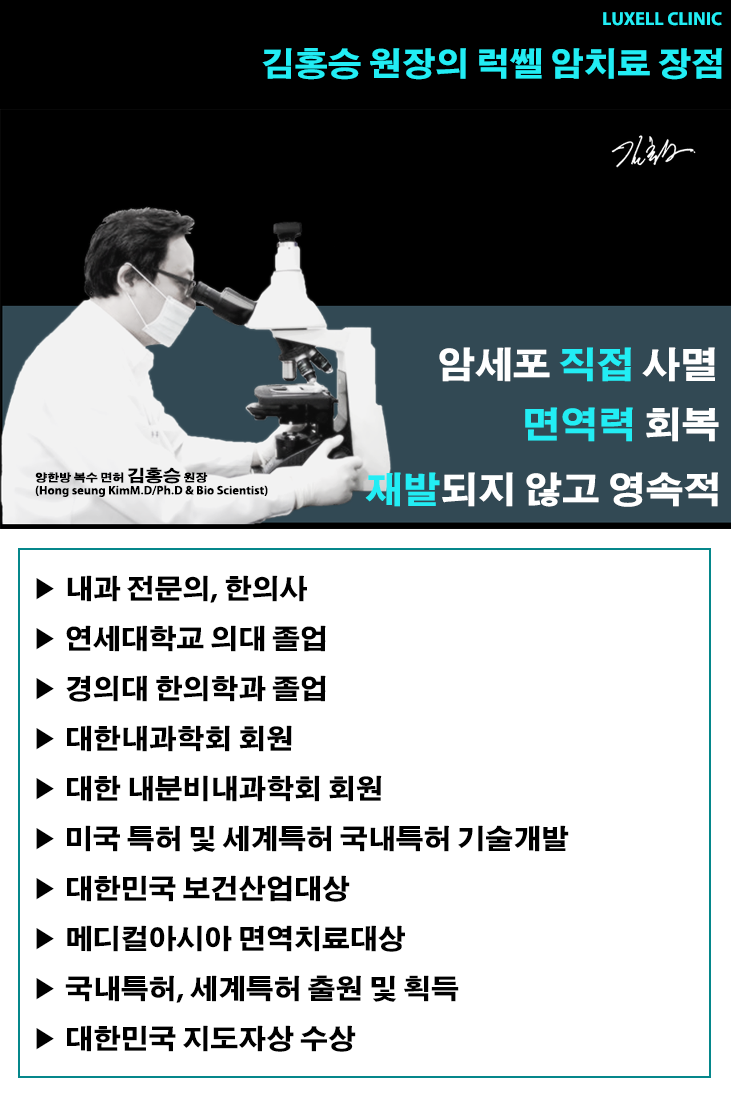
<style>
.page{position:relative;width:731px;height:1094px;background:#ffffff}
.page>*{position:absolute;margin:0}
.t1{font:16.2px "AdobeGothicStd-Bold";color:#22edf4;scale:1.11 1}
.t2{font:32.4px "AdobeGothicStd-Bold";color:#22edf4;scale:1.03 1}
.t3{font:36px "AdobeGothicStd-Bold";color:#ffffff;scale:1.05 1}
.t4{font:36px "AdobeGothicStd-Bold";color:#22edf4;scale:1.05 1}
.t5{font:10.8px/18px "AdobeGothicStd-Bold";color:#000000;scale:1.11 1}
.t6{font:16.2px/18px "AdobeGothicStd-Bold";color:#000000;scale:1.11 1}
.t7{font:27px/50px "AdobeGothicStd-Bold";color:#000000;scale:1.03 1}
</style>
<div class="page">
<p class="t1" style="left:603px;top:12px;width:119px;height:14px">LUXELL CLINIC</p>
<p class="t2" style="left:262px;top:48px;width:460px;height:32px">김홍승 원장의 럭쎌 암치료 장점</p>
<p class="t3" style="left:439px;top:347px;width:276px;height:35px">암세포 <span class="t4">직접</span> 사멸</p>
<p class="t4" style="left:525px;top:407px;width:194px;height:35px">면역력<span class="t3"> 회복</span></p>
<p class="t5" style="left:35px;top:467px;width:233px;height:30px">양한방 복수 면허 <span class="t6">김홍승</span> 원장<br>(Hong seung KimM.D/Ph.D &amp; Bio Scientist)</p>
<p class="t3" style="left:365px;top:472px;width:353px;height:35px"><span class="t4">재발</span>되지 않고 영속적</p>
<p class="t7" style="left:36px;top:575px;width:533px;height:477px">▶ 내과 전문의, 한의사<br>▶ 연세대학교 의대 졸업<br>▶ 경의대 한의학과 졸업<br>▶ 대한내과학회 회원<br>▶ 대한 내분비내과학회 회원<br>▶ 미국 특허 및 세계특허 국내특허 기술개발<br>▶ 대한민국 보건산업대상<br>▶ 메디컬아시아 면역치료대상<br>▶ 국내특허, 세계특허 출원 및 획득<br>▶ 대한민국 지도자상 수상</p>
</div>
